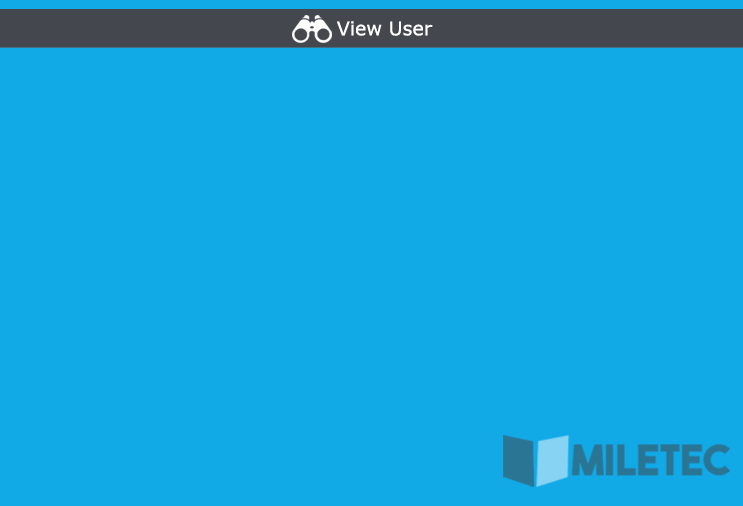
<style>
.page{position:relative;width:743px;height:506px;background:#12a9e7}
.page>*{position:absolute;margin:0}
.t1{font:18.9px "Verdana";color:#ffffff}
</style>
<div class="page">
<p class="t1" style="left:337px;top:21px;width:96px;height:15px">View User</p>
</div>
